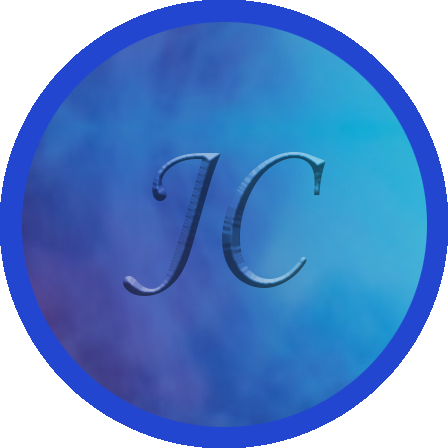
<style>
.page{position:relative;width:448px;height:448px;background:#ffffff}
.page>*{position:absolute;margin:0}
.t1{font:200px "MonotypeCorsiva"}
</style>
<div class="page">
<p class="t1" style="left:123px;top:152px;width:203px;height:144px">JC</p>
</div>
